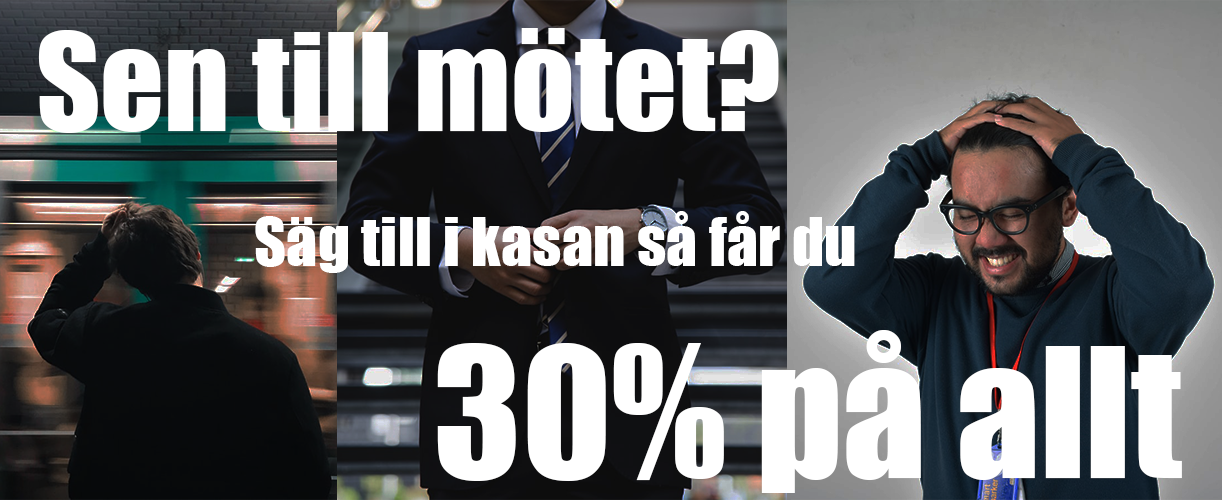
<style>
.page{position:relative;width:1222px;height:500px}
.page>*{position:absolute;margin:0}
.t1{font:125px "Impact";color:#ffffff}
.t2{font:62.5px "Impact";color:#ffffff}
.t3{font:166.7px "Impact";color:#ffffff}
</style>
<div class="page">
<p class="t1" style="left:38px;top:28px;width:741px;height:105px">Sen till mötet?</p>
<p class="t2" style="left:255px;top:211px;width:600px;height:62px">Säg till i kasan så får du</p>
<p class="t3" style="left:437px;top:330px;width:745px;height:163px">30% på allt</p>
</div>
